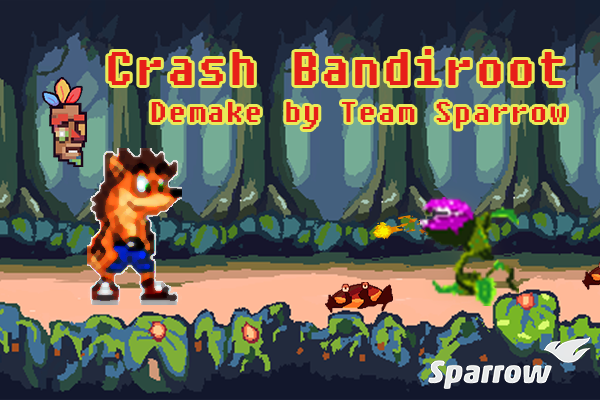
<style>
.page{position:relative;width:600px;height:400px}
.page>*{position:absolute;margin:0}
.t1{font:33.3px/54.2px "FixedsysTTF";letter-spacing:0.02em;color:#e71f19}
.t2{font:54.2px/54.2px "FixedsysTTF";letter-spacing:0.02em;color:#e71f19}
</style>
<div class="page">
<p class="t1" style="left:108px;top:49px;width:458px;height:80px;text-align:right"><span class="t2">Crash Bandiroot<br></span>Demake by Team Sparrow</p>
</div>
